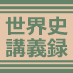
<style>
.page{position:relative;width:73px;height:73px;background:#648469}
.page>*{position:absolute;margin:0}
.t1{font:21px/21.8px "Meiryo-Bold";color:#648469}
</style>
<div class="page">
<p class="t1" style="left:5px;top:16px;width:63px;height:42px">世界史<br>講義録</p>
</div>
